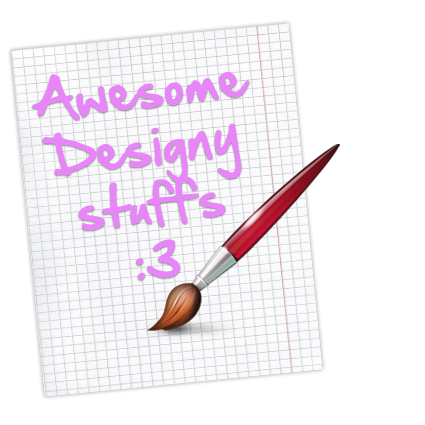
<style>
.page{position:relative;width:425px;height:425px;background:#ffffff}
.page>*{position:absolute;margin:0}
.t1{font:48px "HandOfSean";letter-spacing:0.005em;color:#e785f9}
</style>
<div class="page">
<p class="t1" style="left:31px;top:72px;width:219px;height:208px;text-align:center;rotate:-7deg">Awesome<br>Designy<br>stuffs<br>:3</p>
</div>
